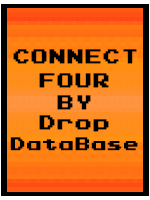
<style>
.page{position:relative;width:150px;height:200px}
.page>*{position:absolute;margin:0}
.t1{font:16px "PressStartK";letter-spacing:0.06em;color:#000000;font-weight:bold;scale:1.03 1}
.t2{font:14.4px "PressStartK";letter-spacing:0.06em;color:#000000;font-weight:bold;scale:1.03 1}
</style>
<div class="page">
<p class="t1" style="left:13px;top:49px;width:124px;height:15px">CONNECT</p>
<p class="t1" style="left:39px;top:73px;width:70px;height:15px">FOUR</p>
<p class="t1" style="left:57px;top:95px;width:34px;height:15px">BY</p>
<p class="t1" style="left:39px;top:115px;width:70px;height:17px">Drop</p>
<p class="t2" style="left:10px;top:137px;width:128px;height:14px">DataBase</p>
</div>
